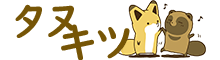
<style>
.page{position:relative;width:220px;height:60px;background:#ffffff}
.page>*{position:absolute;margin:0}
.t1{font:41.5px/21px "UDDigiKyokashoNK-B";color:#765506}
</style>
<div class="page">
<p class="t1" style="left:15px;top:4px;width:115px;height:57px">タヌ<br>　　キツ</p>
</div>
